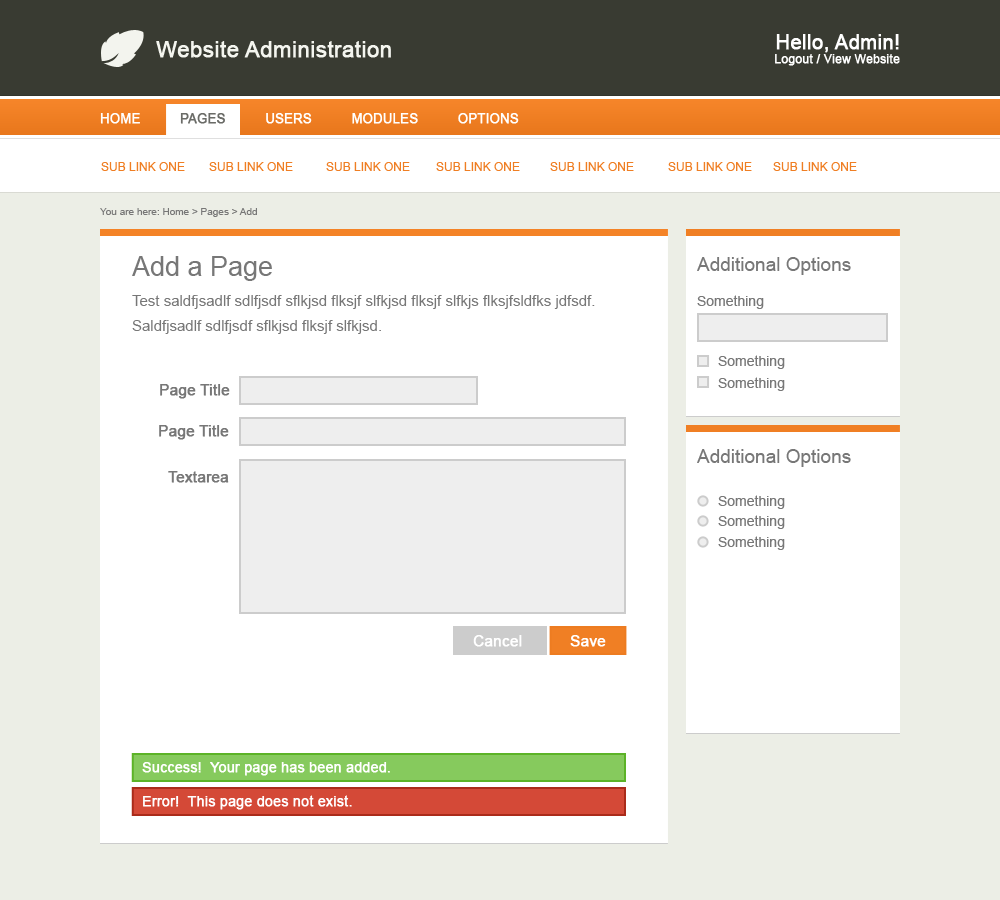
<style>
.page{position:relative;width:1000px;height:900px;background:#ffffff}
.page>*{position:absolute;margin:0}
.t1{font:22px "ArialMT";color:#f4f5ef;font-weight:bold}
.t2{font:12px "ArialMT";color:#ffffff;font-weight:bold}
.t3{font:20px "ArialMT";color:#ffffff;font-weight:bold}
.t4{font:13px "ArialMT";color:#ffffff;font-weight:bold}
.t5{font:13px "ArialMT";color:#6a6b67;font-weight:bold}
.t6{font:12px "ArialMT";color:#ef7e23}
.t7{font:10px "ArialMT";color:#777777}
.t8{font:27px "ArialMT";color:#777777}
.t9{font:19px "ArialMT";color:#777777}
.t10{font:15px "ArialMT";color:#777777}
.t11{font:14px "ArialMT";color:#777777}
.t12{font:15px "ArialMT";color:#777777;font-weight:bold}
.t13{font:15px "ArialMT";color:#ffffff;font-weight:bold}
.t14{font:14px "ArialMT";color:#ffffff;font-weight:bold}
</style>
<div class="page">
<p class="t1" style="left:156px;top:41px;width:235px;height:17px">Website Administration</p>
<p class="t2" style="left:775px;top:34px;width:125px;height:32px;text-align:right"><span class="t3">Hello, Admin!<br></span>Logout / View Website</p>
<p class="t4" style="left:100px;top:113px;width:419px;height:11px">HOME          <span class="t5">PAGES    </span>      USERS          MODULES          OPTIONS</p>
<p class="t6" style="left:101px;top:162px;width:84px;height:9px">SUB LINK ONE</p>
<p class="t6" style="left:209px;top:162px;width:84px;height:9px">SUB LINK ONE</p>
<p class="t6" style="left:326px;top:162px;width:84px;height:9px">SUB LINK ONE</p>
<p class="t6" style="left:436px;top:162px;width:84px;height:9px">SUB LINK ONE</p>
<p class="t6" style="left:550px;top:162px;width:84px;height:9px">SUB LINK ONE</p>
<p class="t6" style="left:668px;top:162px;width:84px;height:9px">SUB LINK ONE</p>
<p class="t6" style="left:773px;top:162px;width:84px;height:9px">SUB LINK ONE</p>
<p class="t7" style="left:100px;top:208px;width:157px;height:9px">You are here: Home &gt; Pages &gt; Add</p>
<p class="t8" style="left:132px;top:256px;width:140px;height:25px">Add a Page</p>
<p class="t9" style="left:697px;top:257px;width:154px;height:18px">Additional Options</p>
<p class="t10" style="left:132px;top:295px;width:463px;height:14px">Test saldfjsadlf sdlfjsdf sflkjsd flksjf slfkjsd flksjf slfkjs flksjfsldfks jdfsdf.</p>
<p class="t11" style="left:697px;top:295px;width:67px;height:14px">Something</p>
<p class="t10" style="left:132px;top:320px;width:249px;height:14px">Saldfjsadlf sdlfjsdf sflkjsd flksjf slfkjsd.</p>
<p class="t11" style="left:718px;top:355px;width:67px;height:14px">Something</p>
<p class="t11" style="left:718px;top:377px;width:67px;height:14px">Something</p>
<p class="t12" style="left:160px;top:384px;width:70px;height:15px">Page Title</p>
<p class="t12" style="left:159px;top:425px;width:70px;height:15px">Page Title</p>
<p class="t9" style="left:697px;top:449px;width:154px;height:18px">Additional Options</p>
<p class="t12" style="left:168px;top:471px;width:61px;height:12px">Textarea</p>
<p class="t11" style="left:718px;top:495px;width:67px;height:14px">Something</p>
<p class="t11" style="left:718px;top:515px;width:67px;height:14px">Something</p>
<p class="t11" style="left:718px;top:536px;width:67px;height:14px">Something</p>
<p class="t13" style="left:473px;top:635px;width:49px;height:12px">Cancel</p>
<p class="t13" style="left:570px;top:635px;width:36px;height:12px">Save</p>
<p class="t14" style="left:142px;top:762px;width:248px;height:14px">Success!  Your page has been added.</p>
<p class="t14" style="left:143px;top:795px;width:209px;height:15px">Error!  This page does not exist.</p>
</div>
